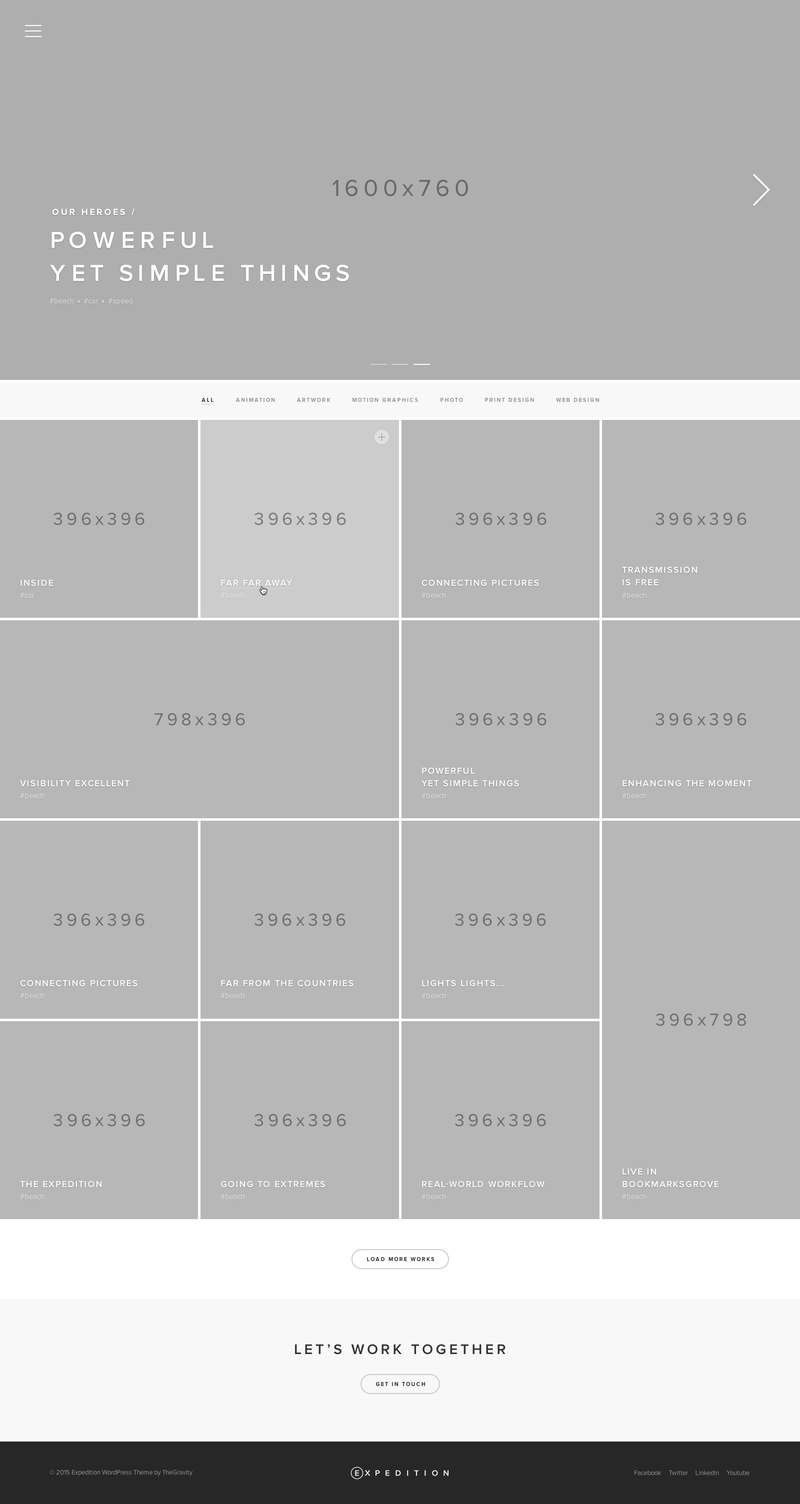
<style>
.page{position:relative;width:800px;height:1504px;background:#b7b7b8}
.page>*{position:absolute;margin:0}
.t1{font:24px "ProximaNova-Regular";letter-spacing:0.2em;color:#686869}
.t2{font:9px "ProximaNova-Bold";letter-spacing:0.2em;color:#ffffff;text-transform:uppercase}
.t3{font:24px/33px "ProximaNova-Semibold";letter-spacing:0.2em;color:#ffffff;text-transform:uppercase}
.t4{font:7.5px "ProximaNova-Regular";color:#e1e1e1}
.t5{font:5.5px "ProximaNova-Bold";letter-spacing:0.2em;color:#333333;text-transform:uppercase}
.t6{font:5.5px "ProximaNova-Bold";letter-spacing:0.2em;color:#959595;text-transform:uppercase}
.t7{font:18px "ProximaNova-Regular";letter-spacing:0.2em;color:#6e6e6e}
.t8{font:18px "ProximaNova-Regular";letter-spacing:0.2em;color:#7a7a7b}
.t9{font:9px/12.5px "ProximaNova-Semibold";letter-spacing:0.1em;color:#ffffff;text-transform:uppercase}
.t10{font:9px "ProximaNova-Semibold";letter-spacing:0.1em;color:#ffffff;text-transform:uppercase}
.t11{font:7.5px "ProximaNova-Regular";color:#e2e2e3}
.t12{font:7.5px "ProximaNova-Regular";color:#ffffff}
.t13{font:5.5px "ProximaNova-Bold";letter-spacing:0.2em;color:#303030;text-transform:uppercase}
.t14{font:14.5px "ProximaNova-Semibold";letter-spacing:0.2em;color:#333333;text-transform:uppercase}
.t15{font:6.5px "ProximaNova-Regular";color:#939393}
</style>
<div class="page">
<p class="t1" style="left:332px;top:180px;width:136px;height:16px">1600x760</p>
<p class="t2" style="left:52px;top:208px;width:82px;height:8px">Our heroes /</p>
<p class="t3" style="left:50px;top:232px;width:299px;height:50px">Powerful<br>yet simple things</p>
<p class="t4" style="left:50px;top:298px;width:82px;height:7px">#beach     #car     #speed</p>
<p class="t5" style="left:202px;top:398px;width:12px;height:4px">All</p>
<p class="t6" style="left:236px;top:398px;width:364px;height:4px">Animation        Artwork        Motion Graphics        Photo        Print Design        Web Design</p>
<p class="t7" style="left:54px;top:512px;width:90px;height:14px">396x396</p>
<p class="t8" style="left:254px;top:512px;width:92px;height:14px">396x396</p>
<p class="t7" style="left:456px;top:512px;width:90px;height:14px">396x396</p>
<p class="t7" style="left:656px;top:512px;width:90px;height:14px">396x396</p>
<p class="t9" style="left:622px;top:566px;width:76px;height:20px">Transmission<br>is free</p>
<p class="t10" style="left:20px;top:580px;width:33px;height:6px">Inside</p>
<p class="t10" style="left:221px;top:580px;width:71px;height:6px">Far far away</p>
<p class="t10" style="left:422px;top:580px;width:117px;height:6px">Connecting pictures</p>
<p class="t11" style="left:20px;top:593px;width:14px;height:5px">#car</p>
<p class="t12" style="left:220px;top:593px;width:24px;height:5px;opacity:0.6">#beach</p>
<p class="t11" style="left:422px;top:593px;width:24px;height:5px">#beach</p>
<p class="t11" style="left:622px;top:593px;width:24px;height:5px">#beach</p>
<p class="t7" style="left:154px;top:713px;width:91px;height:13px">798x396</p>
<p class="t7" style="left:456px;top:713px;width:90px;height:13px">396x396</p>
<p class="t7" style="left:656px;top:713px;width:90px;height:13px">396x396</p>
<p class="t9" style="left:422px;top:768px;width:97px;height:19px">Powerful<br>yet simple things</p>
<p class="t10" style="left:20px;top:780px;width:110px;height:7px">Visibility Excellent</p>
<p class="t10" style="left:622px;top:780px;width:130px;height:7px">Enhancing the moment</p>
<p class="t11" style="left:20px;top:794px;width:24px;height:5px">#beach</p>
<p class="t11" style="left:422px;top:794px;width:24px;height:5px">#beach</p>
<p class="t11" style="left:622px;top:794px;width:24px;height:5px">#beach</p>
<p class="t7" style="left:54px;top:914px;width:90px;height:12px">396x396</p>
<p class="t7" style="left:254px;top:914px;width:92px;height:12px">396x396</p>
<p class="t7" style="left:455px;top:914px;width:91px;height:12px">396x396</p>
<p class="t10" style="left:20px;top:980px;width:118px;height:7px">Connecting pictures</p>
<p class="t10" style="left:221px;top:980px;width:133px;height:7px">far from the countries</p>
<p class="t10" style="left:422px;top:980px;width:82px;height:7px">lights lights...</p>
<p class="t11" style="left:20px;top:994px;width:24px;height:5px">#beach</p>
<p class="t11" style="left:220px;top:994px;width:24px;height:5px">#beach</p>
<p class="t11" style="left:422px;top:994px;width:24px;height:5px">#beach</p>
<p class="t7" style="left:656px;top:1014px;width:90px;height:12px">396x798</p>
<p class="t7" style="left:54px;top:1114px;width:91px;height:13px">396x396</p>
<p class="t7" style="left:254px;top:1114px;width:92px;height:13px">396x396</p>
<p class="t7" style="left:455px;top:1114px;width:91px;height:13px">396x396</p>
<p class="t9" style="left:622px;top:1169px;width:96px;height:19px">live in<br>Bookmarksgrove</p>
<p class="t10" style="left:20px;top:1181px;width:82px;height:7px">The expedition</p>
<p class="t10" style="left:220px;top:1181px;width:105px;height:7px">Going to Extremes</p>
<p class="t10" style="left:422px;top:1181px;width:122px;height:7px">Real-world workflow</p>
<p class="t11" style="left:20px;top:1194px;width:24px;height:6px">#beach</p>
<p class="t11" style="left:220px;top:1194px;width:24px;height:6px">#beach</p>
<p class="t11" style="left:422px;top:1194px;width:24px;height:6px">#beach</p>
<p class="t11" style="left:622px;top:1194px;width:24px;height:6px">#beach</p>
<p class="t13" style="left:367px;top:1257px;width:67px;height:5px">Load more works</p>
<p class="t14" style="left:295px;top:1344px;width:211px;height:11px">Let’s work together</p>
<p class="t13" style="left:376px;top:1382px;width:50px;height:5px">Get in touch</p>
<p class="t15" style="left:50px;top:1470px;width:142px;height:6px">© 2015 Expedition WordPress Theme by TheGravity</p>
<p class="t15" style="left:634px;top:1471px;width:116px;height:5px">Facebook     Twitter     Linkedin     Youtube</p>
</div>
